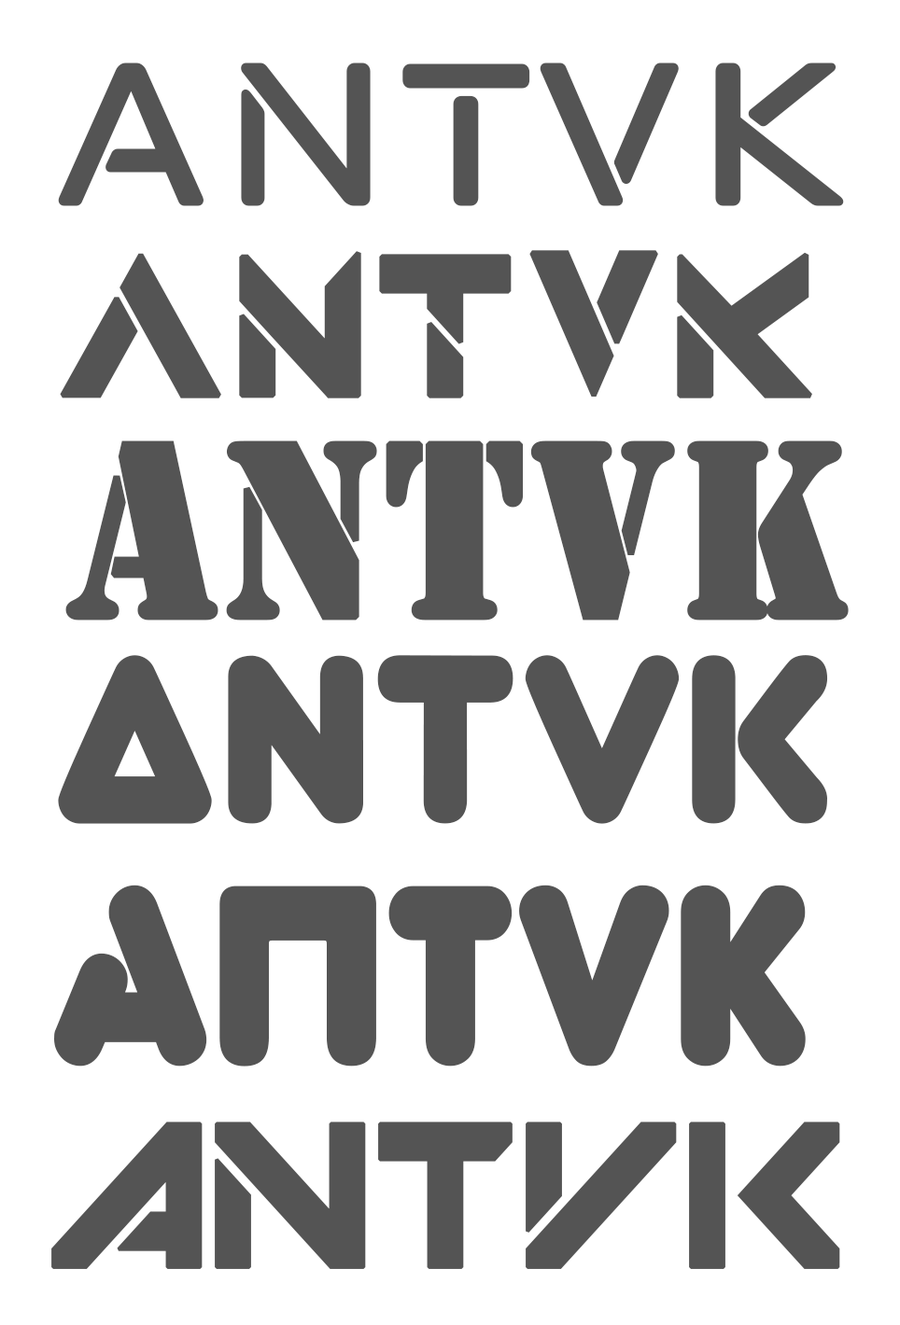
<style>
.page{position:relative;width:900px;height:1325px;background:#ffffff}
.page>*{position:absolute;margin:0}
.t1{font:263px "neo-latina";color:#545454;font-weight:bold;scale:0.91 1}
.t2{font:202.5px "QuantumRegular";color:#545454;font-weight:bold;scale:0.91 1}
.t3{font:258.3px "Stencil";color:#545454;font-weight:bold;scale:0.91 1}
.t4{font:258.3px "Virgo01";color:#545454;font-weight:bold;scale:0.91 1}
.t5{font:245.2px "Zorque-Regular";color:#545454;font-weight:bold;scale:0.91 1}
.t6{font:143.5px "Mechsuit";color:#545454;font-weight:bold;scale:0.91 1}
</style>
<div class="page">
<p class="t1" style="left:58px;top:63px;width:786px;height:143px">ANTVK</p>
<p class="t2" style="left:60px;top:250px;width:752px;height:149px">ANTVK</p>
<p class="t3" style="left:65px;top:441px;width:783px;height:180px">ANTVK</p>
<p class="t4" style="left:58px;top:655px;width:770px;height:169px">ANTVK</p>
<p class="t5" style="left:54px;top:885px;width:751px;height:182px">ANTVK</p>
<p class="t6" style="left:51px;top:1122px;width:789px;height:147px">ANTVK</p>
</div>
